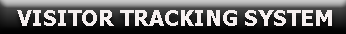
<style>
.page{position:relative;width:346px;height:34px;background:#f5efef}
.page>*{position:absolute;margin:0}
.t1{font:22px "Tahoma-Bold";color:#f5efef}
</style>
<div class="page">
<p class="t1" style="left:17px;top:10px;width:315px;height:16px">VISITOR TRACKING SYSTEM</p>
</div>
